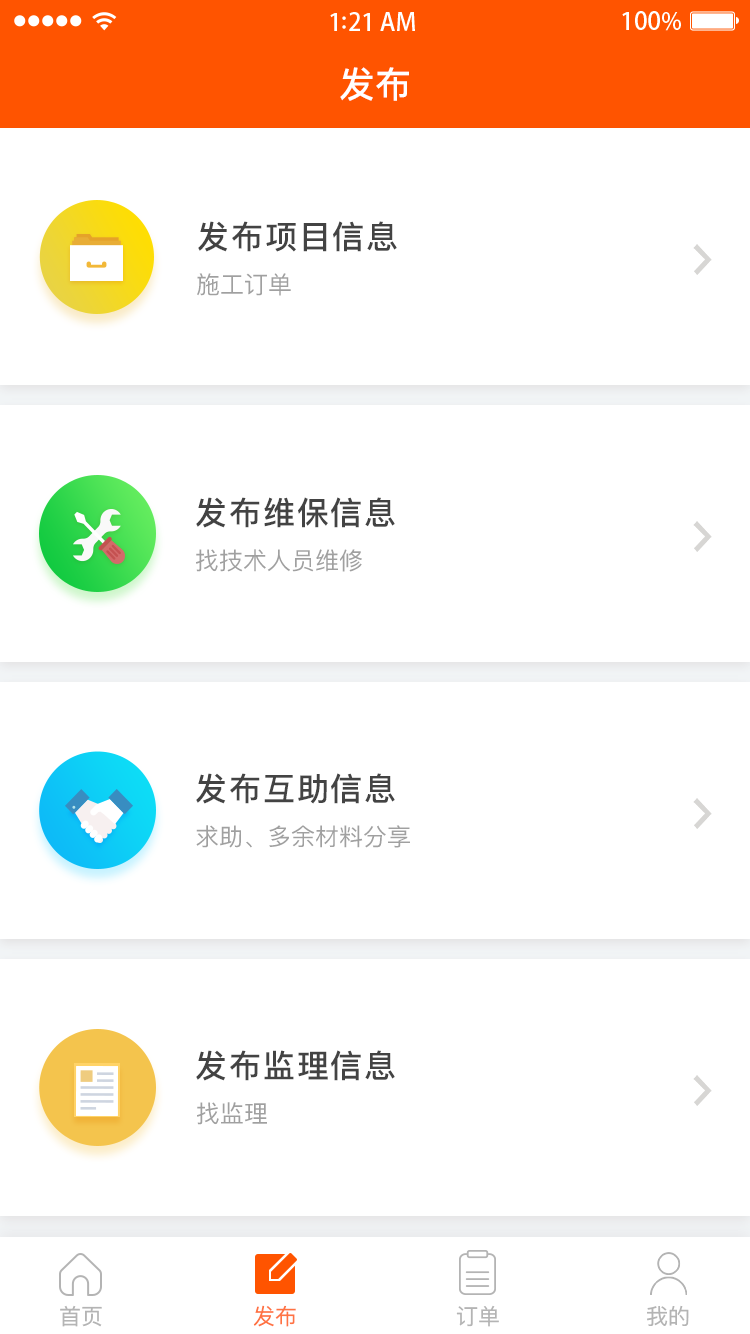
<style>
.page{position:relative;width:750px;height:1334px;background:#ffffff}
.page>*{position:absolute;margin:0}
.t1{font:36px "PingFangSC-Medium";color:#ffffff}
.t2{font:32px "PingFangSC-Medium";letter-spacing:0.06em;color:#434343}
.t3{font:24px "PingFangSC-Regular";color:#a0a0a0}
.t4{font:22px "PingFangSC-Regular";color:#b4b4b4}
.t5{font:22px "PingFangSC-Regular";color:#ff7342}
</style>
<div class="page">
<p class="t1" style="left:340px;top:67px;width:69px;height:34px">发布</p>
<p class="t2" style="left:198px;top:221px;width:199px;height:31px">发布项目信息</p>
<p class="t3" style="left:197px;top:273px;width:94px;height:23px">施工订单</p>
<p class="t2" style="left:196px;top:497px;width:199px;height:31px">发布维保信息</p>
<p class="t3" style="left:196px;top:549px;width:166px;height:23px">找技术人员维修</p>
<p class="t2" style="left:196px;top:773px;width:199px;height:31px">发布互助信息</p>
<p class="t3" style="left:196px;top:825px;width:214px;height:23px">求助、多余材料分享</p>
<p class="t2" style="left:196px;top:1050px;width:199px;height:31px">发布监理信息</p>
<p class="t3" style="left:197px;top:1102px;width:70px;height:23px">找监理</p>
<p class="t4" style="left:60px;top:1305px;width:42px;height:22px">首页</p>
<p class="t5" style="left:253px;top:1305px;width:43px;height:22px">发布</p>
<p class="t4" style="left:456px;top:1305px;width:43px;height:22px">订单</p>
<p class="t4" style="left:647px;top:1305px;width:42px;height:21px">我的</p>
</div>
